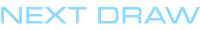
<style>
.page{position:relative;width:200px;height:30px;background:#ffffff}
.page>*{position:absolute;margin:0}
.t1{font:24px "MicrogrammaD-MediExte";letter-spacing:0.075em;color:#8dd9ff;font-weight:bold}
</style>
<div class="page">
<p class="t1" style="left:1px;top:7px;width:199px;height:17px">NEXT DRAW</p>
</div>
